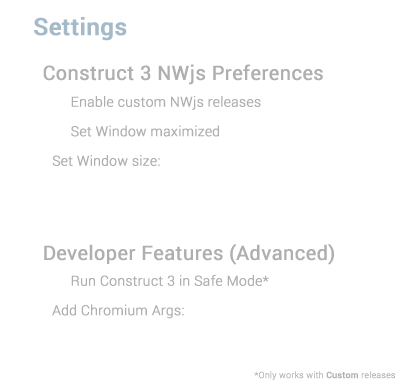
<style>
.page{position:relative;width:400px;height:385px;background:#ffffff}
.page>*{position:absolute;margin:0}
.t1{font:23.7px "Roboto-Medium";color:#a5bac8;font-weight:bold}
.t2{font:19.7px "Roboto-Regular";color:#afafaf;font-weight:bold}
.t3{font:13.8px/29.6px "Roboto-Light";color:#afafaf;font-weight:bold}
.t4{font:8.9px "Roboto-Light";color:#a5bac8;font-weight:bold}
.t5{font:8.9px "Roboto-Medium";color:#9f9f9f;font-weight:bold}
</style>
<div class="page">
<p class="t1" style="left:34px;top:17px;width:93px;height:24px">Settings</p>
<p class="t2" style="left:43px;top:64px;width:280px;height:21px">Construct 3 NWjs Preferences</p>
<p class="t3" style="left:52px;top:96px;width:209px;height:70px">Enable custom NWjs releases<br>     Set Window maximized<br>Set Window size:</p>
<p class="t2" style="left:44px;top:244px;width:290px;height:21px">Developer Features (Advanced)</p>
<p class="t3" style="left:52px;top:275px;width:217px;height:44px">Run Construct 3 in Safe Mode*<br>Add Chromium Args:</p>
<p class="t4" style="left:254px;top:371px;width:141px;height:9px">*Only works with <span class="t5">Custom</span> releases</p>
</div>
